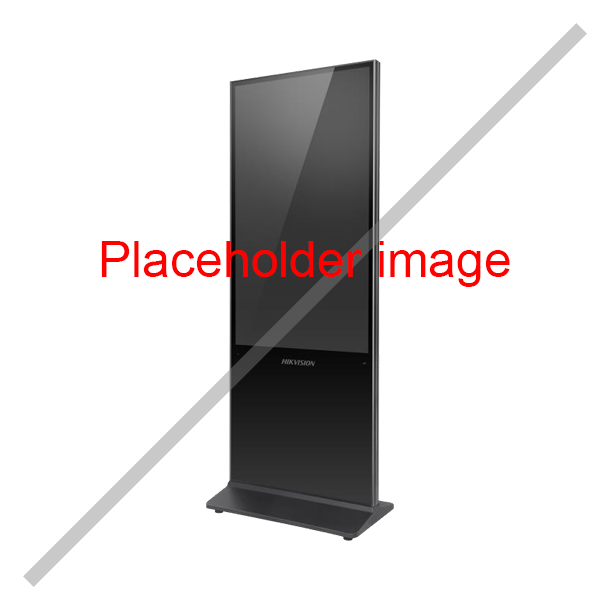
<style>
.page{position:relative;width:600px;height:600px;background:#ffffff}
.page>*{position:absolute;margin:0}
.t1{font:50px "ArialMT";color:#ff0000}
</style>
<div class="page">
<p class="t1" style="left:101px;top:241px;width:409px;height:46px">Placeholder image</p>
</div>
